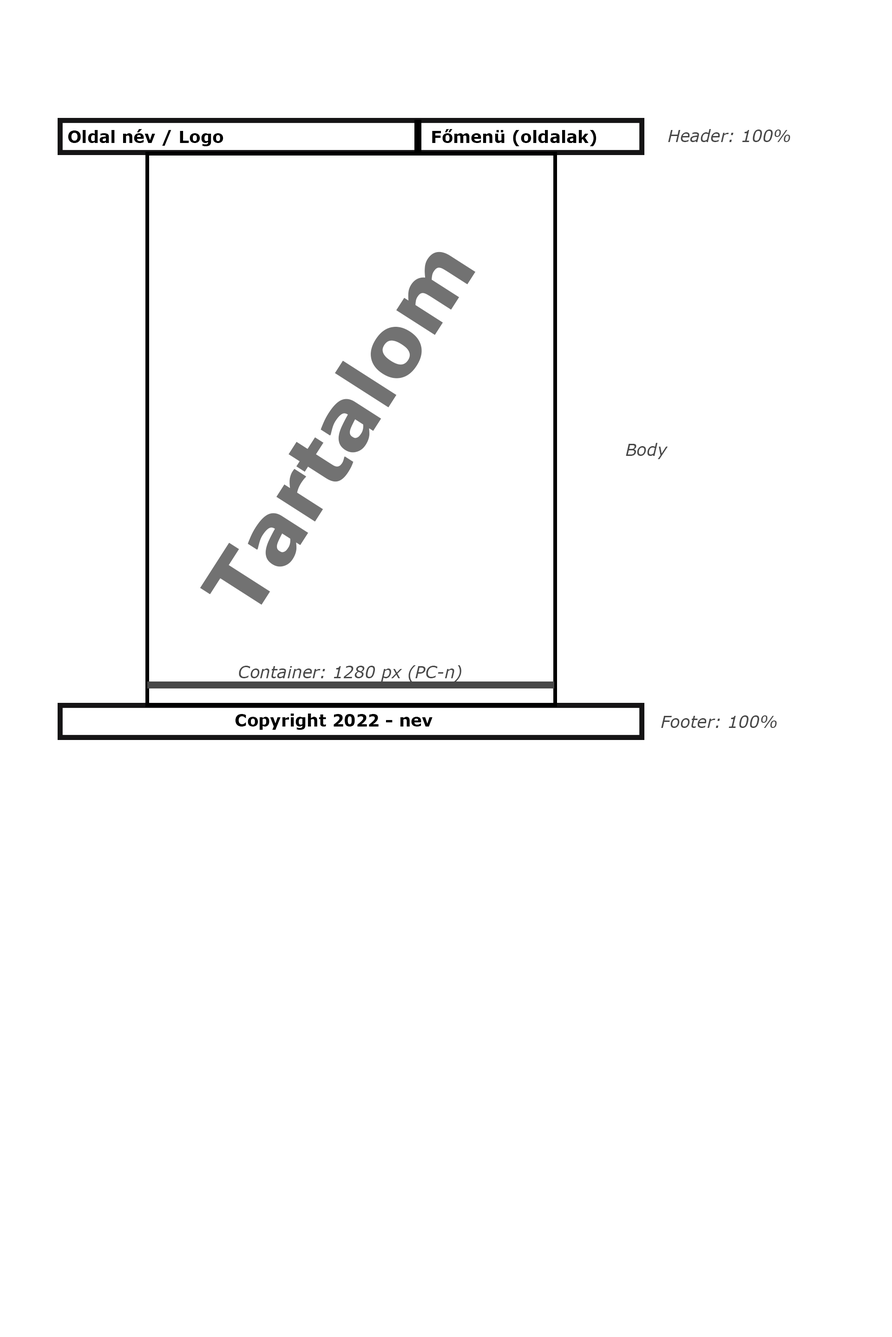
<style>
.page{position:relative;width:892px;height:1337px;background:#ffffff}
.page>*{position:absolute;margin:0}
.t1{font:16.7px "Verdana-Bold";color:#000000}
.t2{font:16.7px "Verdana-Italic";color:#484848}
.t3{font:83.6px "Verdana-Bold";color:#727272}
</style>
<div class="page">
<p class="t1" style="left:68px;top:129px;width:155px;height:17px">Oldal név / Logo</p>
<p class="t1" style="left:432px;top:129px;width:164px;height:17px">Főmenü (oldalak)</p>
<p class="t2" style="left:668px;top:129px;width:122px;height:13px">Header: 100%</p>
<p class="t3" style="left:200px;top:252px;width:276px;height:353px;rotate:-57deg">Tartalom</p>
<p class="t2" style="left:626px;top:443px;width:42px;height:16px">Body</p>
<p class="t2" style="left:239px;top:665px;width:222px;height:17px">Container: 1280 px (PC-n)</p>
<p class="t1" style="left:235px;top:714px;width:197px;height:16px">Copyright 2022 - nev</p>
<p class="t2" style="left:661px;top:716px;width:115px;height:12px">Footer: 100%</p>
</div>
